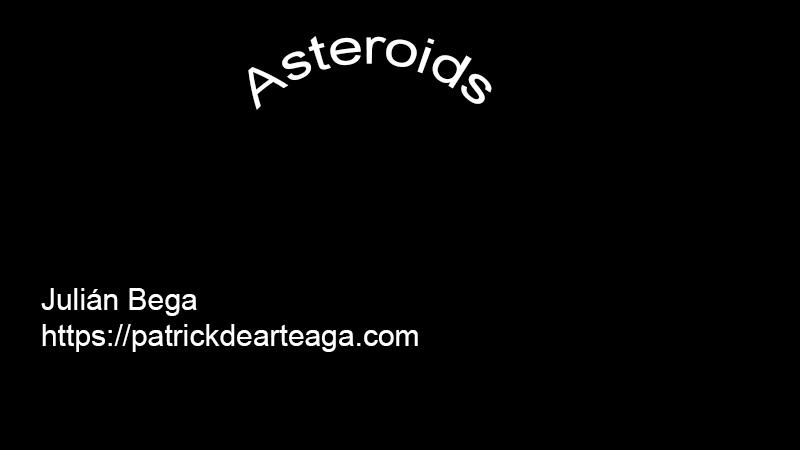
<style>
.page{position:relative;width:800px;height:450px;background:#000000}
.page>*{position:absolute;margin:0}
.t1{font:48px "ArialMT";color:#ffffff}
.t2{font:30px "ArialMT";color:#ffffff}
</style>
<div class="page">
<p class="t1" style="left:248px;top:36px;width:244px;height:74px">Asteroids</p>
<p class="t2" style="left:41px;top:288px;width:377px;height:64px">Julián Bega<br>https://patrickdearteaga.com</p>
</div>
